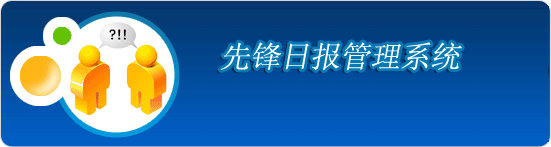
<style>
.page{position:relative;width:551px;height:147px}
.page>*{position:absolute;margin:0}
.t1{font:30px "NSimSun";color:#ffffff;font-style:italic}
</style>
<div class="page">
<p class="t1" style="left:220px;top:42px;width:242px;height:29px">先锋日报管理系统</p>
</div>
